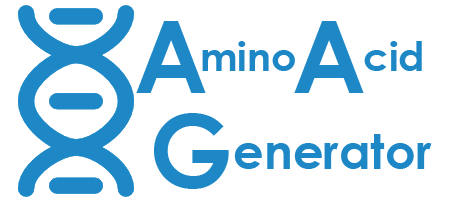
<style>
.page{position:relative;width:450px;height:200px;background:#ffffff}
.page>*{position:absolute;margin:0}
.t1{font:100px "CenturyGothic-Bold";color:#1d88c5}
.t2{font:40px "CenturyGothic-Bold";color:#1d88c5}
.t3{font:48px "CenturyGothic-Bold";color:#1d88c5}
</style>
<div class="page">
<p class="t1" style="left:136px;top:21px;width:70px;height:72px">A</p>
<p class="t1" style="left:294px;top:21px;width:70px;height:72px">A</p>
<p class="t2" style="left:202px;top:41px;width:93px;height:30px">mino</p>
<p class="t2" style="left:364px;top:41px;width:58px;height:30px">cid</p>
<p class="t1" style="left:154px;top:113px;width:75px;height:76px">G</p>
<p class="t3" style="left:234px;top:134px;width:198px;height:35px">enerator</p>
</div>
